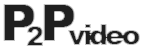
<style>
.page{position:relative;width:150px;height:50px;background:#ffffff}
.page>*{position:absolute;margin:0}
.t1{font:29.2px "Arial-Black";letter-spacing:-0.12em}
.t2{font:51.2px "Arial-Black";letter-spacing:-0.22em}
.t3{font:27.3px "Arial-Black";letter-spacing:-0.14em}
.t4{font:51.2px "Arial-Black";letter-spacing:-0.18em}
.t5{font:29.2px "Arial-Black";letter-spacing:-0.1em}
</style>
<div class="page">
<p class="t1" style="left:3px;top:4px;width:137px;height:42px"><span class="t2">P</span><span class="t3">2</span><span class="t4">P</span><span class="t5">v</span>id<span class="t5">eo</span></p>
</div>
